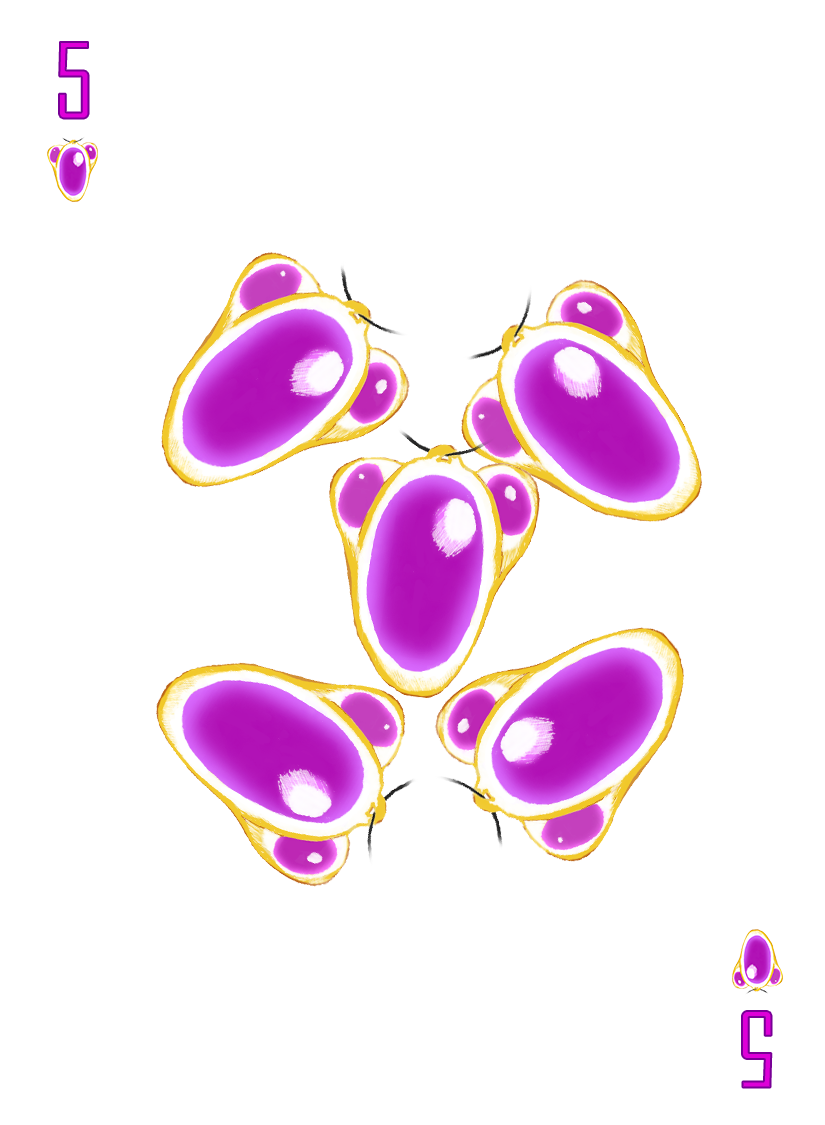
<style>
.page{position:relative;width:825px;height:1125px;background:#ffffff}
.page>*{position:absolute;margin:0}
.t1{font:100px "AgencyFB-Reg";color:#de00d8}
</style>
<div class="page">
<p class="t1" style="left:59px;top:42px;width:30px;height:77px">5</p>
<p class="t1" style="left:742px;top:1011px;width:30px;height:77px;rotate:180deg">5</p>
</div>
